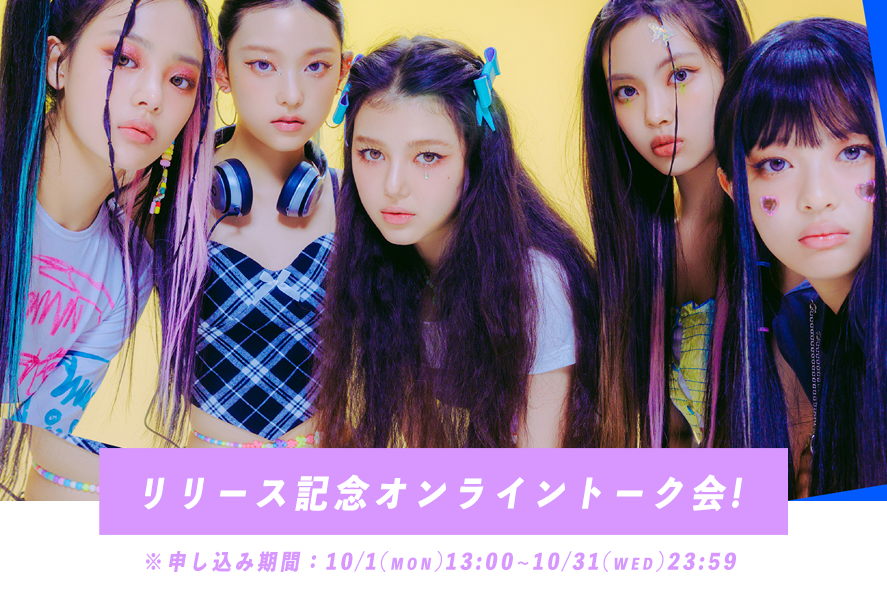
<style>
.page{position:relative;width:887px;height:591px}
.page>*{position:absolute;margin:0}
.t1{font:37.7px "ToppanBunkyuMidashiGothicStdN-ExtraBold";letter-spacing:0.2em;color:#ffffff;font-style:italic;scale:0.88 1}
.t2{font:21.6px "ToppanBunkyuMidashiGothicStdN-ExtraBold";letter-spacing:0.2em;color:#d797ff;font-variant:small-caps;font-style:italic;scale:0.88 1}
.t3{font:21.6px "ToppanBunkyuMidashiGothicStdN-ExtraBold";letter-spacing:0.2em;color:#d797ff;scale:0.88 1}
.t4{font:21.6px "ToppanBunkyuMidashiGothicStdN-ExtraBold";letter-spacing:0.2em;color:#d797ff;font-style:italic;scale:0.88 1}
</style>
<div class="page">
<p class="t1" style="left:144px;top:474px;width:599px;height:38px">リリース記念オンライントーク会!</p>
<p class="t2" style="left:146px;top:550px;width:590px;height:22px"><span class="t3">※</span><span class="t4">申し込み期間：</span>10/1(mon)13:00~10/31(wed)23:59</p>
</div>
